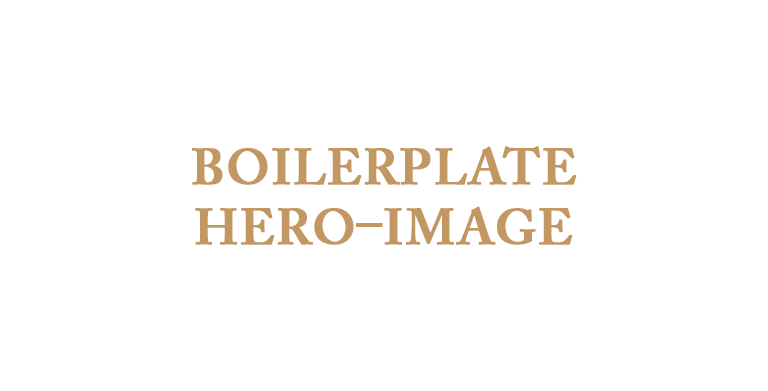
<style>
.page{position:relative;width:768px;height:391px;background:#ffffff}
.page>*{position:absolute;margin:0}
.t1{font:50px "ACaslonPro-Semibold";color:#c39761;text-transform:uppercase;font-weight:bold}
</style>
<div class="page">
<p class="t1" style="left:192px;top:146px;width:385px;height:99px;text-align:center">Boilerplate<br>hero–image</p>
</div>
